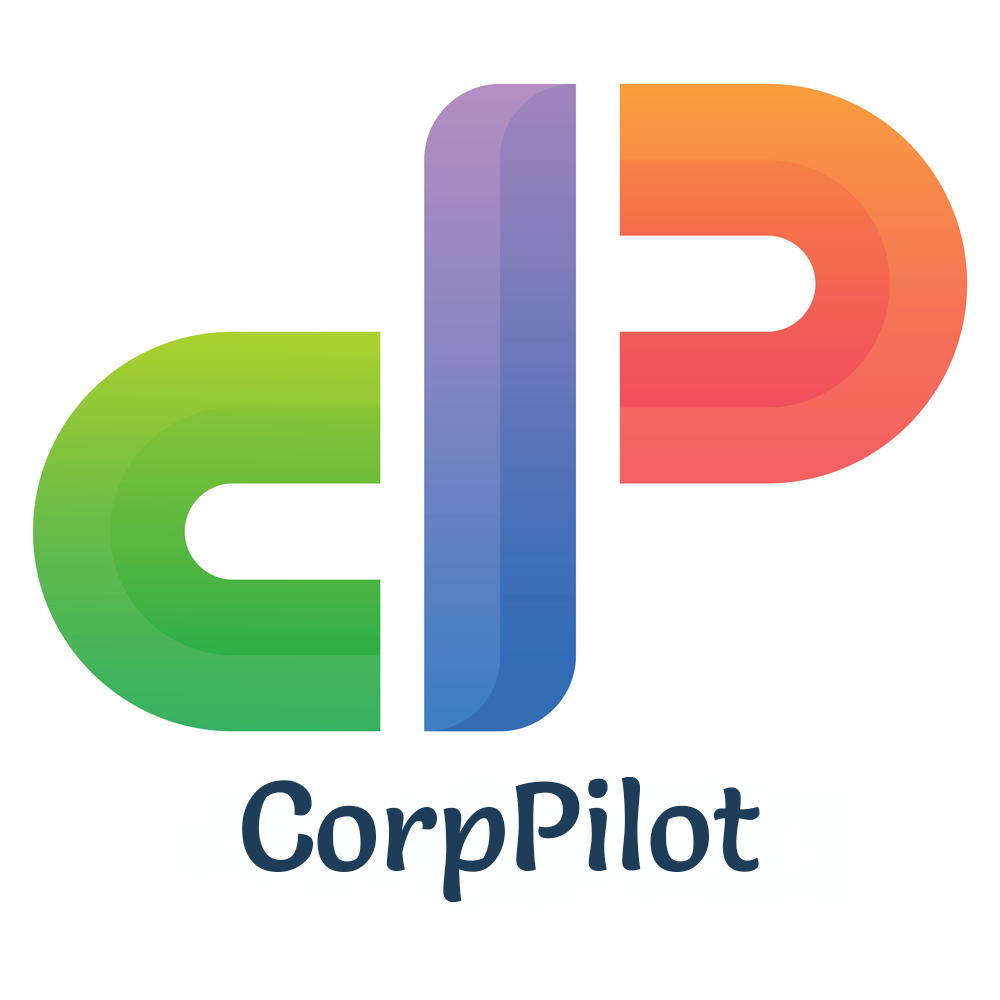
<style>
.page{position:relative;width:1000px;height:1000px;background:#ffffff}
.page>*{position:absolute;margin:0}
.t1{font:125px "Salsa-Regular";color:#1e3d59}
</style>
<div class="page">
<p class="t1" style="left:242px;top:777px;width:518px;height:126px">CorpPilot</p>
</div>
